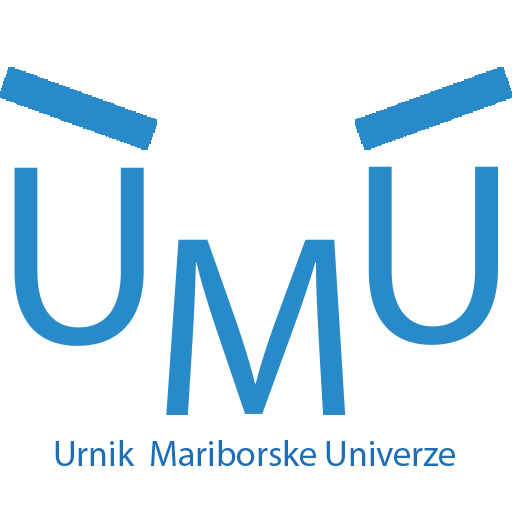
<style>
.page{position:relative;width:512px;height:512px;background:#ffffff}
.page>*{position:absolute;margin:0}
.t1{font:36px "MyriadPro-Regular";color:#1d6eb6}
</style>
<div class="page">
<p class="t1" style="left:55px;top:440px;width:400px;height:26px">Urnik  Mariborske Univerze</p>
</div>
